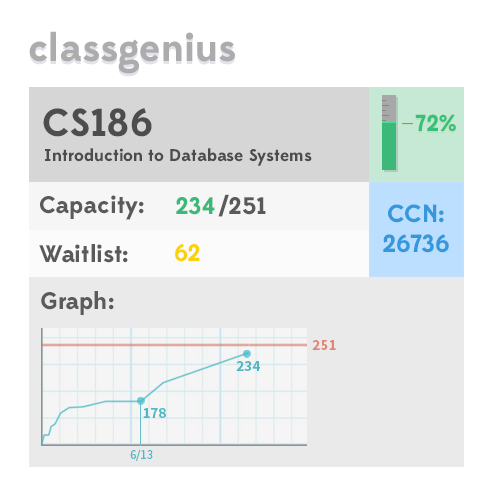
<style>
.page{position:relative;width:500px;height:500px;background:#ffffff}
.page>*{position:absolute;margin:0}
.t1{font:39px "Edmondsans-Bold";color:#acacac}
.t2{font:39px "Edmondsans-Bold";color:#4c4c4c}
.t3{font:23.1px "Edmondsans-Bold";color:#38bf79}
.t4{font:17px "Edmondsans-Bold";color:#4c4c4c}
.t5{font:24px "Edmondsans-Bold";color:#5a5a5a}
.t6{font:24px "Edmondsans-Bold";color:#3cb878}
.t7{font:24.9px "Edmondsans-Bold";color:#3498db}
.t8{font:24px "Edmondsans-Bold";color:#fbd10e}
.t9{font:15px "SourceSansPro-Bold";color:#e08675}
.t10{font:15px "SourceSansPro-Bold";color:#4eb9c4}
.t11{font:12.9px "SourceSansPro-Regular";color:#4eb9c4}
</style>
<div class="page">
<p class="t1" style="left:29px;top:31px;width:206px;height:43px">classgenius</p>
<p class="t2" style="left:43px;top:108px;width:109px;height:29px">CS186</p>
<p class="t3" style="left:415px;top:114px;width:41px;height:17px">72%</p>
<p class="t4" style="left:45px;top:148px;width:267px;height:18px">Introduction to Database Systems</p>
<p class="t5" style="left:40px;top:195px;width:104px;height:25px">Capacity:</p>
<p class="t6" style="left:176px;top:197px;width:39px;height:18px">234</p>
<p class="t5" style="left:218px;top:194px;width:48px;height:23px">/251</p>
<p class="t7" style="left:383px;top:204px;width:66px;height:49px;text-align:center">CCN:<br>26736</p>
<p class="t5" style="left:39px;top:244px;width:89px;height:19px">Waitlist:</p>
<p class="t8" style="left:175px;top:243px;width:25px;height:19px">62</p>
<p class="t5" style="left:41px;top:291px;width:73px;height:24px">Graph:</p>
<p class="t9" style="left:312px;top:340px;width:24px;height:10px">251</p>
<p class="t10" style="left:236px;top:361px;width:24px;height:10px">234</p>
<p class="t10" style="left:143px;top:408px;width:23px;height:10px">178</p>
<p class="t11" style="left:130px;top:449px;width:23px;height:12px">6/13</p>
</div>
